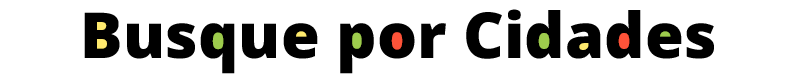
<style>
.page{position:relative;width:795px;height:80px;background:#ffffff}
.page>*{position:absolute;margin:0}
.t1{font:63.4px "OpenSans-ExtraBold";color:#000000}
</style>
<div class="page">
<p class="t1" style="left:84px;top:9px;width:630px;height:65px">Busque por Cidades</p>
</div>
